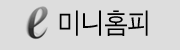
<style>
.page{position:relative;width:180px;height:50px;background:#dddddd}
.page>*{position:absolute;margin:0}
.t1{font:28.6px "SandJg";letter-spacing:-0.01em;color:#000000;scale:0.91 1}
</style>
<div class="page">
<p class="t1" style="left:59px;top:10px;width:89px;height:26px">미니홈피</p>
</div>
